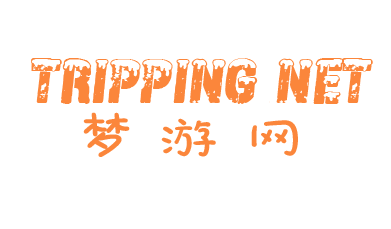
<style>
.page{position:relative;width:391px;height:229px;background:#ffffff}
.page>*{position:absolute;margin:0}
.t1{font:60px "CFGrandNord-Regular";color:#fb863b}
.t2{font:60px "STHeitiK-Light";color:#fb863b}
</style>
<div class="page">
<p class="t1" style="left:31px;top:58px;width:342px;height:46px">tripping net</p>
<p class="t2" style="left:83px;top:112px;width:215px;height:45px">梦 游 网</p>
</div>
